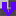
<style>
.page{position:relative;width:16px;height:16px;background:#6000ff}
.page>*{position:absolute;margin:0}
.t1{font:18px "ArcadeClassic";letter-spacing:0.02em;color:#6000ff;font-weight:bold}
</style>
<div class="page">
<p class="t1" style="left:2px;top:2px;width:14px;height:14px">V</p>
</div>
